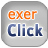
<style>
.page{position:relative;width:48px;height:48px}
.page>*{position:absolute;margin:0}
.t1{font:14px "Verdana";letter-spacing:0.025em;color:#f96604;scale:0.9 1}
.t2{font:18px "Colaborate-Bold";letter-spacing:0.025em;scale:0.9 1}
</style>
<div class="page">
<p class="t1" style="left:8px;top:11px;width:29px;height:9px">exer</p>
<p class="t2" style="left:7px;top:24px;width:36px;height:13px">Click</p>
</div>
